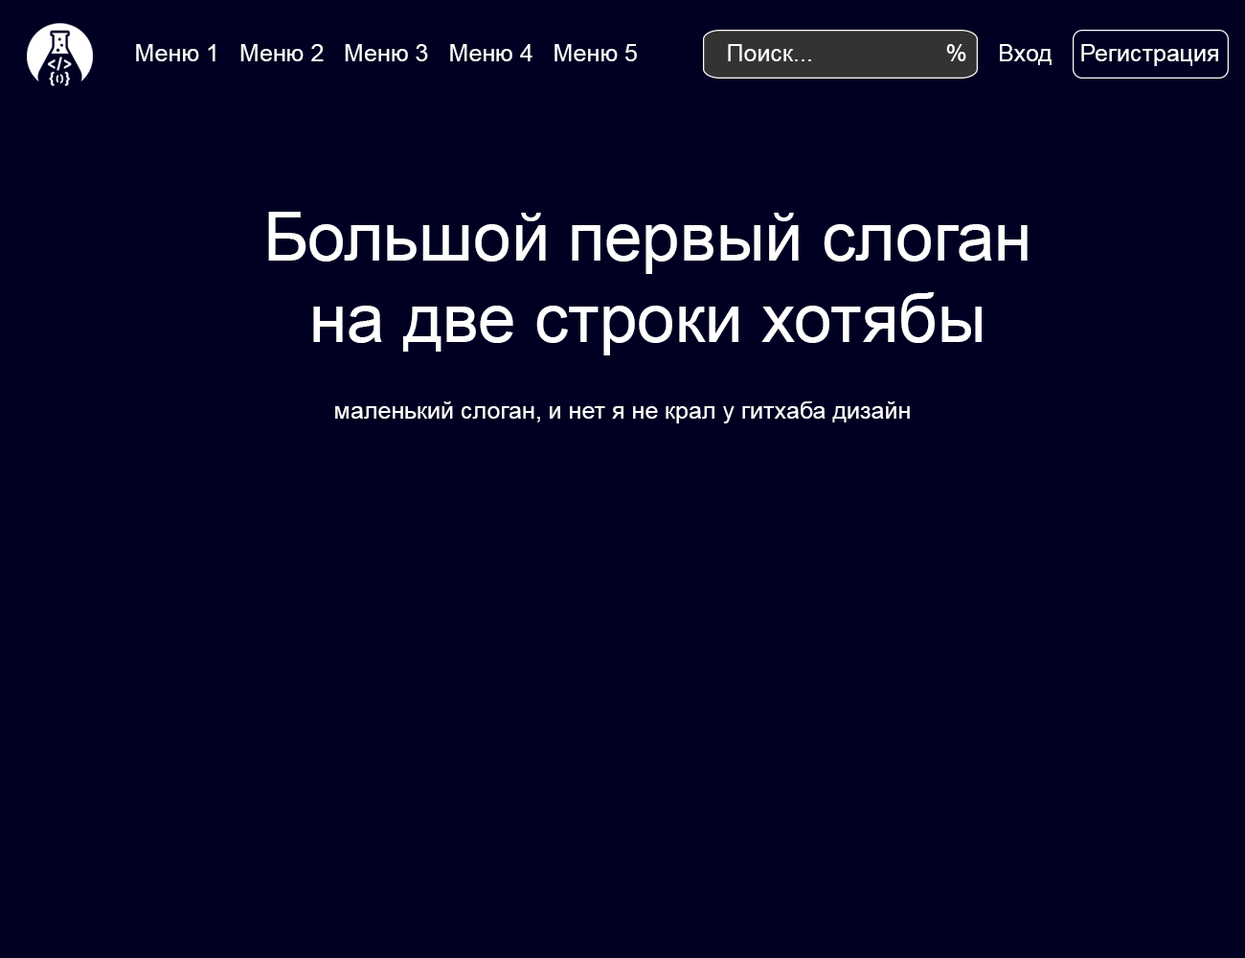
<style>
.page{position:relative;width:1245px;height:958px;background:#000023}
.page>*{position:absolute;margin:0}
.t1{font:23.9px "ArialMT";color:#ffffff}
.t2{font:67.8px "ArialMT";color:#ffffff}
.t3{font:24px "ArialMT";color:#ffffff}
</style>
<div class="page">
<p class="t1" style="left:136px;top:44px;width:501px;height:17px">Меню 1   Меню 2   Меню 3   Меню 4   Меню 5</p>
<p class="t1" style="left:728px;top:44px;width:238px;height:17px">Поиск...                    %</p>
<p class="t1" style="left:1000px;top:44px;width:52px;height:21px">Вход</p>
<p class="t1" style="left:1081px;top:44px;width:137px;height:22px">Регистрация</p>
<p class="t2" style="left:268px;top:212px;width:760px;height:143px;text-align:center">Большой первый слоган<br>на две строки хотябы</p>
<p class="t3" style="left:335px;top:401px;width:575px;height:22px">маленький слоган, и нет я не крал у гитхаба дизайн</p>
</div>
